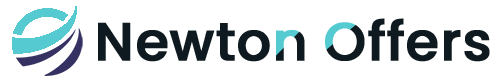
<style>
.page{position:relative;width:500px;height:83px;background:#ffffff}
.page>*{position:absolute;margin:0}
.t1{font:53.6px "Poppins-Medium";color:#0f1a20;font-weight:bold}
</style>
<div class="page">
<p class="t1" style="left:98px;top:18px;width:392px;height:44px">Newton Offers</p>
</div>
